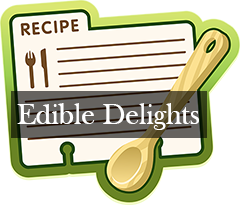
<style>
.page{position:relative;width:240px;height:205px;background:#ffffff}
.page>*{position:absolute;margin:0}
.t1{font:30px "BaskOldFace";color:#ffffff}
</style>
<div class="page">
<p class="t1" style="left:17px;top:103px;width:182px;height:27px">Edible Delights</p>
</div>
